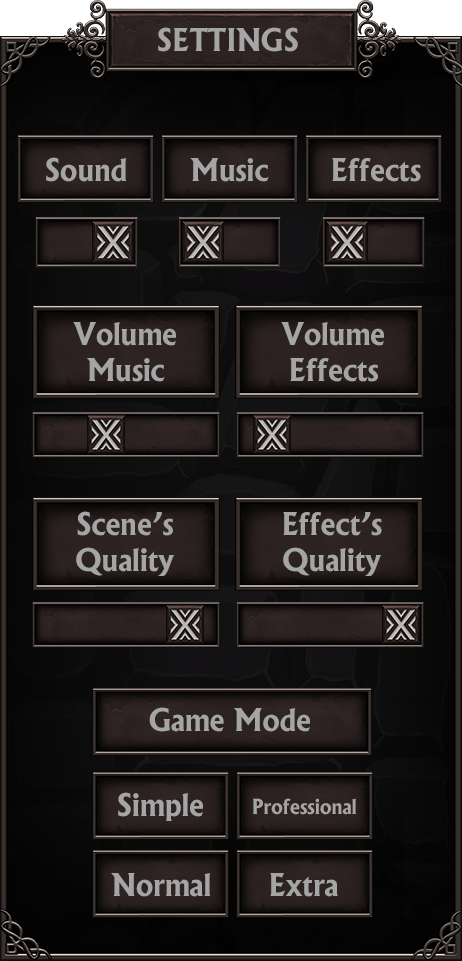
<style>
.page{position:relative;width:462px;height:961px}
.page>*{position:absolute;margin:0}
.t1{font:30px "AlbertusBold-Regular";color:#a5a5a5}
.t2{font:20px "AlbertusBold-Regular";color:#a5a5a5}
</style>
<div class="page">
<p class="t1" style="left:158px;top:27px;width:140px;height:25px">SETTINGS</p>
<p class="t1" style="left:46px;top:157px;width:81px;height:25px">Sound</p>
<p class="t1" style="left:190px;top:158px;width:79px;height:24px">Music</p>
<p class="t1" style="left:332px;top:158px;width:89px;height:24px">Effects</p>
<p class="t1" style="left:73px;top:322px;width:103px;height:60px;text-align:center">Volume<br>Music</p>
<p class="t1" style="left:281px;top:322px;width:103px;height:60px;text-align:center">Volume<br>Effects</p>
<p class="t1" style="left:76px;top:511px;width:99px;height:65px;text-align:center">Scene’s<br>Quality</p>
<p class="t1" style="left:283px;top:512px;width:99px;height:64px;text-align:center">Effect’s<br>Quality</p>
<p class="t1" style="left:149px;top:707px;width:161px;height:25px">Game Mode</p>
<p class="t1" style="left:118px;top:792px;width:85px;height:29px">Simple</p>
<p class="t2" style="left:253px;top:798px;width:103px;height:17px">Professional</p>
<p class="t1" style="left:111px;top:873px;width:100px;height:24px">Normal</p>
<p class="t1" style="left:270px;top:873px;width:68px;height:24px">Extra</p>
</div>
